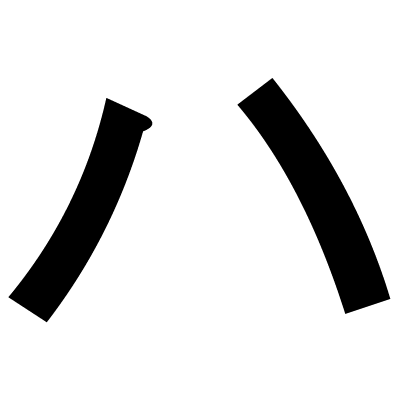
<style>
.page{position:relative;width:400px;height:400px;background:#ffffff}
.page>*{position:absolute;margin:0}
.t1{font:424.8px "MS-PGothic";color:#000000}
</style>
<div class="page">
<p class="t1" style="left:8px;top:78px;width:383px;height:245px">ハ</p>
</div>
